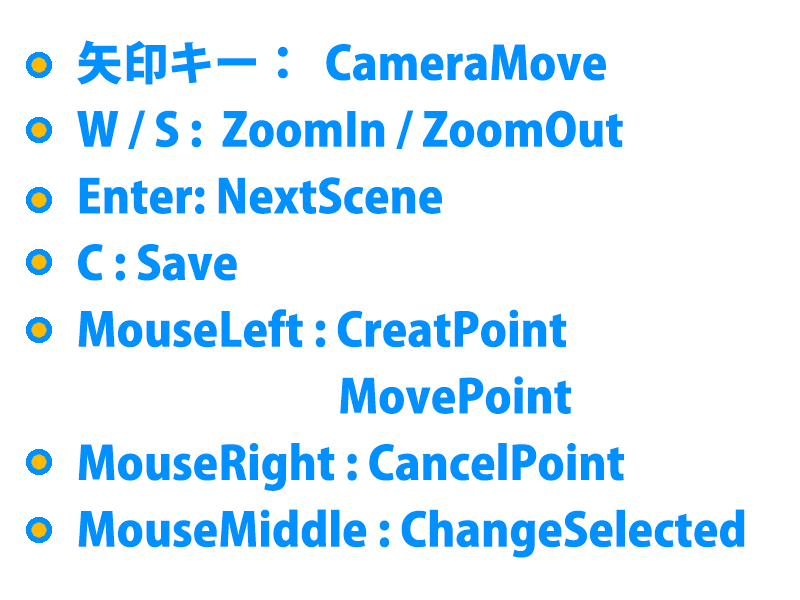
<style>
.page{position:relative;width:800px;height:600px;background:#ffffff}
.page>*{position:absolute;margin:0}
.t1{font:45.8px/66.7px "KozGoPr6N-Heavy";color:#0090ff}
</style>
<div class="page">
<p class="t1" style="left:77px;top:40px;width:668px;height:518px">矢印キー：  CameraMove<br>W / S :  ZoomIn / ZoomOut<br>Enter: NextScene<br>C : Save     <br>MouseLeft : CreatPoint<br>        MovePoint<br>MouseRight : CancelPoint<br>MouseMiddle : ChangeSelected</p>
</div>
